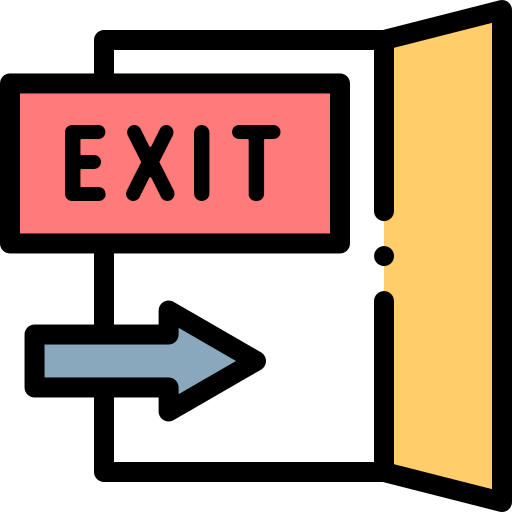
<style>
.page{position:relative;width:512px;height:512px;background:#ffffff}
.page>*{position:absolute;margin:0}
.t1{font:106.7px "BudokanRounded-Bold";letter-spacing:0.12em;color:#000000}
</style>
<div class="page">
<p class="t1" style="left:65px;top:125px;width:216px;height:76px">EXIT</p>
</div>
